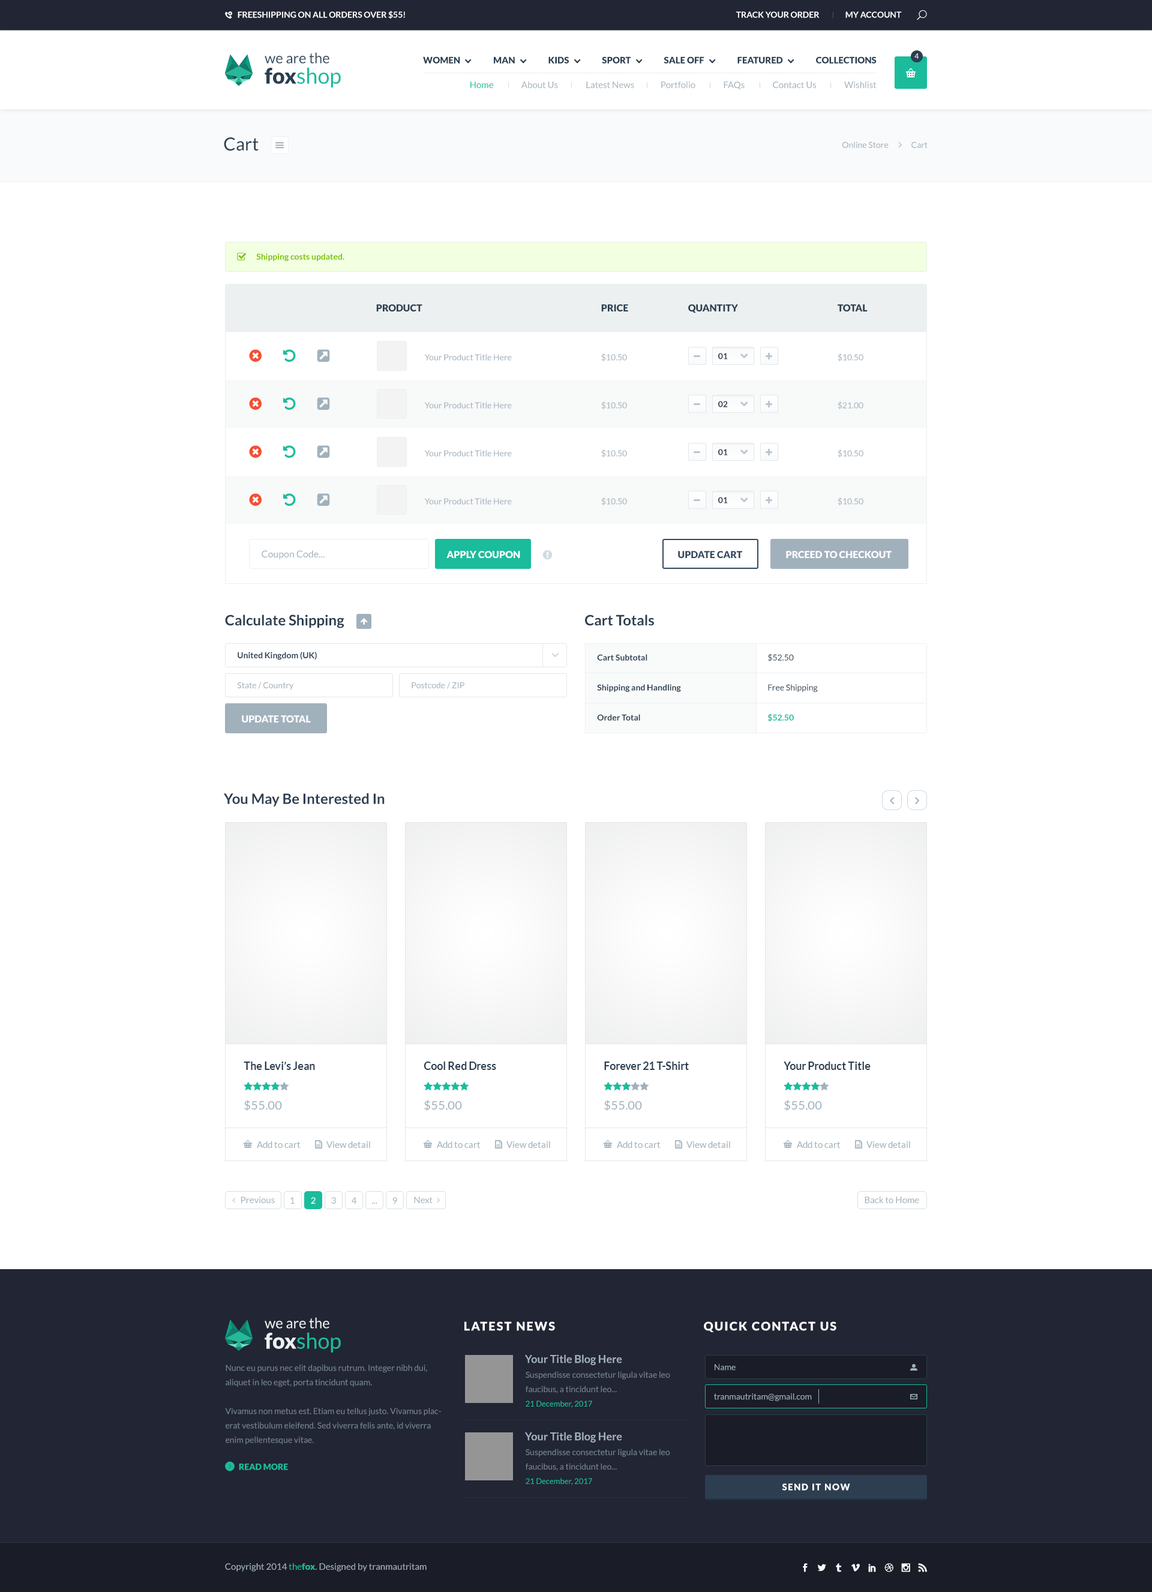
<style>
.page{position:relative;width:1152px;height:1592px;background:#ffffff}
.page>*{position:absolute;margin:0}
.t1{font:8.4px "Lato-Bold";color:#ffffff}
.t2{font:14.4px/20.4px "Lato-Regular";color:#34495e}
.t3{font:21.6px/20.4px "Lato-Black";color:#2c3e50}
.t4{font:21.6px/20.4px "Lato-Regular";color:#1abc9c}
.t5{font:7.2px "Lato-Regular"}
.t6{font:9px "Lato-Black";color:#2c3e50;text-transform:uppercase}
.t7{font:9px "Lato-Regular";color:#a1b1bc}
.t8{font:9px "Lato-Regular";color:#1abc9c}
.t9{font:18px "Lato-Regular";color:#2c3e50}
.t10{font:8.4px "Lato-Regular";color:#a1b1bc}
.t11{font:8.4px "Lato-Bold";color:#7bc200}
.t12{font:9.6px "Lato-Black";color:#2c3e50}
.t13{font:8.4px "Lato-Bold";color:#2c3e50}
.t14{font:9.6px "Lato-Regular";color:#a1b1bc}
.t15{font:9.6px "Lato-Black";color:#ffffff}
.t16{font:9.6px "Lato-Black";color:#34495e}
.t17{font:14.4px "Lato-Bold";color:#2c3e50}
.t18{font:8.4px/30px "Lato-Bold";color:#2c3e50}
.t19{font:8.4px/30px "Lato-Regular";color:#2c3e50}
.t20{font:8.4px/30px "Lato-Bold";color:#1abc9c}
.t21{font:9px "Lato-Regular";color:#ffffff}
.t22{font:14.4px/20.4px "Lato-Regular";color:#ecf0f1}
.t23{font:21.6px/20.4px "Lato-Black";color:#ecf0f1}
.t24{font:12px "Lato-Black";letter-spacing:0.1em;color:#ffffff;text-transform:uppercase}
.t25{font:10.8px "Lato-Bold";color:#a1b1bc}
.t26{font:8.4px/14.4px "Lato-Regular";color:#758590}
.t27{font:7.8px/14.4px "Lato-Regular";color:#1abc9c}
.t28{font:8.4px "Lato-Black";color:#1abc9c}
.t29{font:9px "Lato-Black";letter-spacing:0.1em;color:#ffffff}
.t30{font:9px "Lato-Black";color:#1abc9c}
</style>
<div class="page">
<p class="t1" style="left:238px;top:11px;width:167px;height:8px">FREESHIPPING ON ALL ORDERS OVER $55!</p>
<p class="t1" style="left:736px;top:11px;width:166px;height:7px">TRACK YOUR ORDER                MY ACCOUNT</p>
<p class="t2" style="left:265px;top:52px;width:76px;height:36px">we are the<br><span class="t3">fox</span><span class="t4">shop</span></p>
<p class="t5" style="left:914px;top:53px;width:5px;height:6px">4</p>
<p class="t6" style="left:423px;top:56px;width:454px;height:8px">Women                   Man                   KIDS                   SPORT                   Sale Off                   FEATURED                   COLLECTIONS</p>
<p class="t7" style="left:470px;top:81px;width:407px;height:8px"><span class="t8">Home</span>                About Us                Latest News               Portfolio                FAQs                Contact Us                Wishlist</p>
<p class="t9" style="left:224px;top:137px;width:35px;height:14px">Cart</p>
<p class="t10" style="left:842px;top:142px;width:86px;height:6px">Online Store              Cart</p>
<p class="t11" style="left:256px;top:253px;width:88px;height:8px">Shipping costs updated.</p>
<p class="t12" style="left:376px;top:304px;width:46px;height:7px">PRODUCT</p>
<p class="t12" style="left:601px;top:304px;width:27px;height:7px">PRICE</p>
<p class="t12" style="left:688px;top:304px;width:50px;height:9px">QUANTITY</p>
<p class="t12" style="left:838px;top:304px;width:30px;height:7px">TOTAL</p>
<p class="t10" style="left:601px;top:353px;width:26px;height:9px">$10.50</p>
<p class="t13" style="left:718px;top:353px;width:10px;height:6px">01</p>
<p class="t10" style="left:838px;top:353px;width:25px;height:9px">$10.50</p>
<p class="t10" style="left:425px;top:354px;width:87px;height:7px">Your Product Title Here</p>
<p class="t10" style="left:601px;top:401px;width:26px;height:9px">$10.50</p>
<p class="t13" style="left:718px;top:401px;width:10px;height:6px">02</p>
<p class="t10" style="left:838px;top:401px;width:25px;height:9px">$21.00</p>
<p class="t10" style="left:425px;top:402px;width:87px;height:7px">Your Product Title Here</p>
<p class="t10" style="left:601px;top:449px;width:26px;height:9px">$10.50</p>
<p class="t13" style="left:718px;top:449px;width:10px;height:6px">01</p>
<p class="t10" style="left:838px;top:449px;width:25px;height:9px">$10.50</p>
<p class="t10" style="left:425px;top:450px;width:87px;height:7px">Your Product Title Here</p>
<p class="t10" style="left:601px;top:497px;width:26px;height:9px">$10.50</p>
<p class="t13" style="left:718px;top:497px;width:10px;height:6px">01</p>
<p class="t10" style="left:838px;top:497px;width:25px;height:9px">$10.50</p>
<p class="t10" style="left:425px;top:498px;width:87px;height:7px">Your Product Title Here</p>
<p class="t14" style="left:262px;top:550px;width:63px;height:9px">Coupon Code...</p>
<p class="t15" style="left:446px;top:551px;width:74px;height:7px">APPLY COUPON</p>
<p class="t16" style="left:678px;top:551px;width:64px;height:7px">UPDATE CART</p>
<p class="t15" style="left:786px;top:551px;width:106px;height:7px">PRCEED TO CHECKOUT</p>
<p class="t17" style="left:225px;top:614px;width:119px;height:14px">Calculate Shipping</p>
<p class="t17" style="left:585px;top:614px;width:69px;height:12px">Cart Totals</p>
<p class="t13" style="left:238px;top:652px;width:79px;height:8px">United Kingdom (UK)</p>
<p class="t18" style="left:597px;top:654px;width:84px;height:67px">Cart Subtotal <br>Shipping and Handling<br>Order Total</p>
<p class="t19" style="left:767px;top:653px;width:51px;height:69px">$52.50<br>Free Shipping<br><span class="t20">$52.50</span></p>
<p class="t10" style="left:237px;top:682px;width:56px;height:8px">State / Country</p>
<p class="t10" style="left:412px;top:682px;width:52px;height:7px">Postcode / ZIP</p>
<p class="t15" style="left:242px;top:715px;width:69px;height:7px">UPDATE TOTAL</p>
<p class="t17" style="left:224px;top:793px;width:161px;height:13px">You May Be Interested In</p>
<p class="t7" style="left:257px;top:1141px;width:44px;height:7px">Add to cart</p>
<p class="t7" style="left:326px;top:1141px;width:44px;height:7px">View detail</p>
<p class="t7" style="left:437px;top:1141px;width:44px;height:7px">Add to cart</p>
<p class="t7" style="left:506px;top:1141px;width:44px;height:7px">View detail</p>
<p class="t7" style="left:617px;top:1141px;width:44px;height:7px">Add to cart</p>
<p class="t7" style="left:686px;top:1141px;width:44px;height:7px">View detail</p>
<p class="t7" style="left:797px;top:1141px;width:44px;height:7px">Add to cart</p>
<p class="t7" style="left:866px;top:1141px;width:44px;height:7px">View detail</p>
<p class="t7" style="left:241px;top:1196px;width:34px;height:7px">Previous</p>
<p class="t7" style="left:290px;top:1197px;width:5px;height:7px">1</p>
<p class="t21" style="left:311px;top:1197px;width:5px;height:7px">2</p>
<p class="t7" style="left:331px;top:1197px;width:5px;height:7px">3</p>
<p class="t7" style="left:352px;top:1197px;width:5px;height:7px">4</p>
<p class="t7" style="left:372px;top:1202px;width:5px;height:2px">...</p>
<p class="t7" style="left:392px;top:1197px;width:5px;height:7px">9</p>
<p class="t7" style="left:414px;top:1196px;width:19px;height:7px">Next</p>
<p class="t7" style="left:865px;top:1196px;width:54px;height:7px">Back to Home</p>
<p class="t22" style="left:265px;top:1317px;width:76px;height:35px">we are the<br><span class="t23">fox</span><span class="t4">shop</span></p>
<p class="t24" style="left:464px;top:1321px;width:91px;height:10px">Latest News</p>
<p class="t24" style="left:704px;top:1321px;width:132px;height:11px">quick contact us</p>
<p class="t25" style="left:525px;top:1354px;width:97px;height:11px">Your Title Blog Here</p>
<p class="t26" style="left:225px;top:1364px;width:216px;height:80px">Nunc eu purus nec elit dapibus rutrum. Integer nibh dui, aliquet in leo eget, porta tincidunt quam. <br><br>Vivamus non metus est. Etiam eu tellus justo. Vivamus placerat vestibulum eleifend. Sed viverra felis ante, id viverra enim pellentesque vitae.</p>
<p class="t26" style="left:526px;top:1371px;width:144px;height:37px">Suspendisse consectetur ligula vitae leo faucibus, a tincidunt leo...<br><span class="t27">21 December, 2017</span></p>
<p class="t10" style="left:715px;top:1364px;width:21px;height:6px">Name</p>
<p class="t10" style="left:714px;top:1393px;width:98px;height:8px">tranmautritam@gmail.com</p>
<p class="t25" style="left:525px;top:1432px;width:97px;height:10px">Your Title Blog Here</p>
<p class="t26" style="left:526px;top:1448px;width:144px;height:37px">Suspendisse consectetur ligula vitae leo faucibus, a tincidunt leo...<br><span class="t27">21 December, 2017</span></p>
<p class="t28" style="left:239px;top:1463px;width:49px;height:7px">READ MORE</p>
<p class="t29" style="left:782px;top:1483px;width:68px;height:7px">SEND IT NOW</p>
<p class="t7" style="left:225px;top:1563px;width:202px;height:8px">Copyright 2014 <span class="t8">the</span><span class="t30">fox</span>. Designed by tranmautritam</p>
</div>
